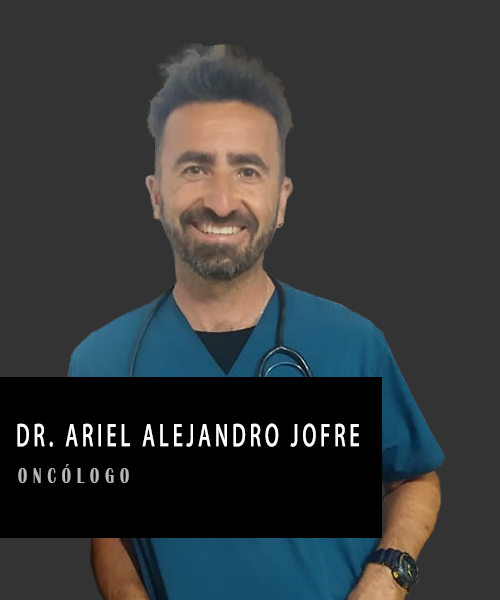
<style>
.page{position:relative;width:500px;height:600px;background:#333333}
.page>*{position:absolute;margin:0}
.t1{font:29px "AdobeFanHeitiStd-Bold";letter-spacing:0.2em;color:#ffffff;scale:0.66 1}
.t2{font:21.8px "BritannicBold";letter-spacing:0.4em;color:#b8b8b8;scale:0.66 1}
</style>
<div class="page">
<p class="t1" style="left:17px;top:423px;width:342px;height:24px">DR. ARIEL ALEJANDRO JOFRE</p>
<p class="t2" style="left:18px;top:464px;width:111px;height:19px">ONCÓLOGO</p>
</div>
